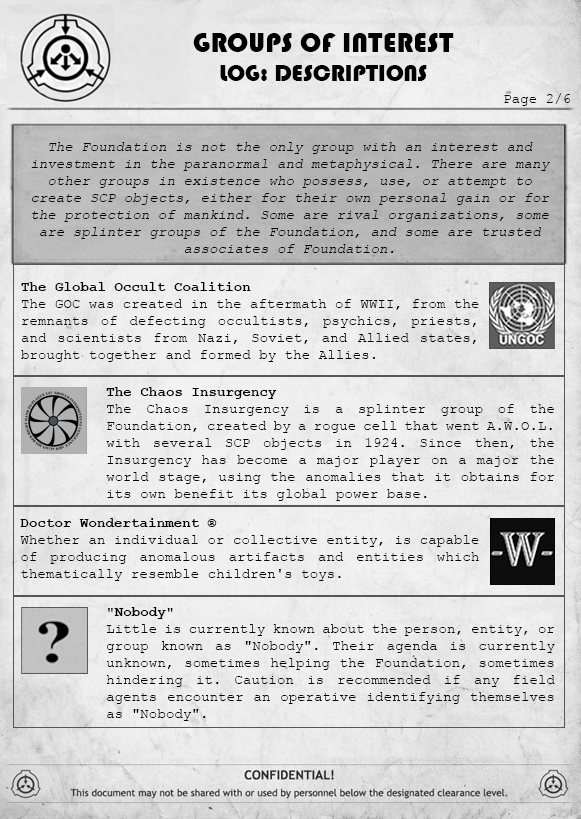
<style>
.page{position:relative;width:581px;height:819px}
.page>*{position:absolute;margin:0}
.t1{font:28.3px "Bauhaus93";color:#000000;text-transform:uppercase}
.t2{font:23.6px "Bauhaus93";color:#000000;text-transform:uppercase}
.t3{font:14.2px "CourierNewPSMT";color:#000000}
.t4{font:14.2px "CourierNewPSMT";color:#000000;font-style:italic}
.t5{font:14.2px "CourierNewPS-BoldMT";color:#000000;text-transform:uppercase}
.t6{font:14.2px "CourierNewPS-BoldMT";color:#000000}
</style>
<div class="page">
<p class="t1" style="left:193px;top:33px;width:261px;height:48px;text-align:center">Groups of interest<br><span class="t2">log: descriptions</span></p>
<p class="t3" style="left:504px;top:93px;width:66px;height:13px">Page 2/6</p>
<p class="t4" style="left:31px;top:142px;width:519px;height:111px;text-align:center"><span class="t5"><br><br></span>The Foundation is not the only group with an interest and investment in the paranormal and metaphysical. There are many other groups in existence who possess, use, or attempt to create SCP objects, either for their own personal gain or for the protection of mankind. Some are rival organizations, some are splinter groups of the Foundation, and some are trusted associates of Foundation.</p>
<p class="t3" style="left:21px;top:282px;width:458px;height:80px;text-align:justify"><span class="t6">The Global Occult Coalition<br></span>The GOC was created in the aftermath of WWII, from the remnants of defecting occultists, psychics, priests, and scientists from Nazi, Soviet, and Allied states, brought together and formed by the Allies.</p>
<p class="t3" style="left:106px;top:387px;width:449px;height:114px;text-align:justify"><span class="t6">The Chaos Insurgency<br></span>The Chaos Insurgency is a splinter group of the Foundation, created by a rogue cell that went A.W.O.L. with several SCP objects in 1924. Since then, the Insurgency has become a major player on a major the world stage, using the anomalies that it obtains for its own benefit its global power base.</p>
<p class="t3" style="left:20px;top:518px;width:459px;height:63px;text-align:justify"><span class="t6">Doctor Wondertainment ®<br></span>Whether an individual or collective entity, is capable of producing anomalous artifacts and entities which thematically resemble children's toys.</p>
<p class="t3" style="left:106px;top:607px;width:449px;height:114px;text-align:justify"><span class="t6">"Nobody"<br></span>Little is currently known about the person, entity, or group known as "Nobody". Their agenda is currently unknown, sometimes helping the Foundation, sometimes hindering it. Caution is recommended if any field agents encounter an operative identifying themselves as "Nobody".</p>
</div>
